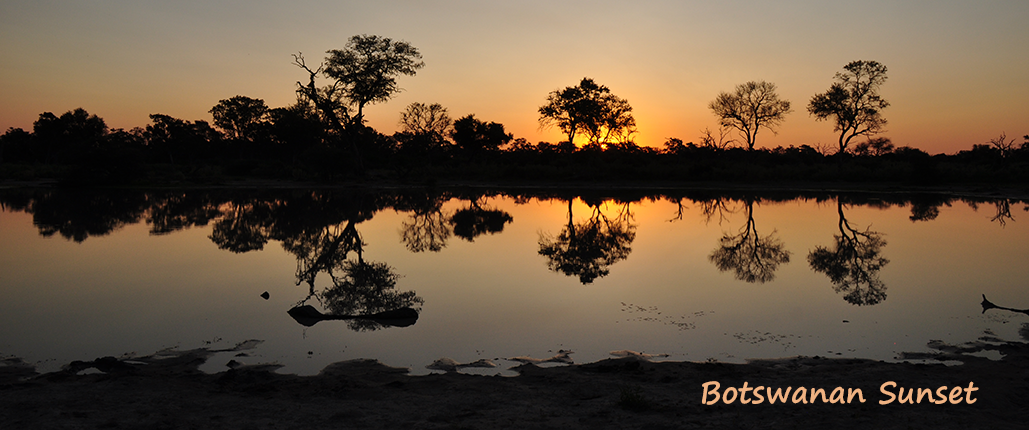
<style>
.page{position:relative;width:1029px;height:430px}
.page>*{position:absolute;margin:0}
.t1{font:30px "SegoePrint-Bold";color:#efb282}
</style>
<div class="page">
<p class="t1" style="left:702px;top:381px;width:277px;height:24px">Botswanan Sunset</p>
</div>
